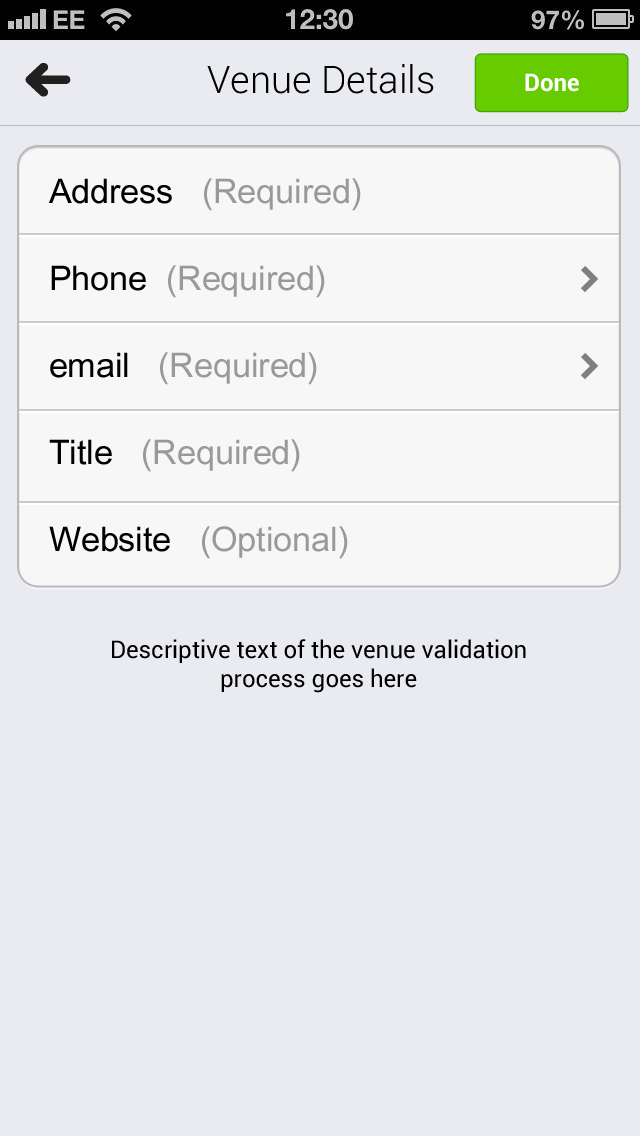
<style>
.page{position:relative;width:640px;height:1136px;background:#e9ebf0}
.page>*{position:absolute;margin:0}
.t1{font:38px "Roboto-Light";color:#000000}
.t2{font:24px "Roboto-Bold";color:#ffffff}
.t3{font:34px/87px "ArialUnicodeMS";color:#999999}
.t4{font:34px/87px "ArialUnicodeMS";color:#000000}
.t5{font:24px "Roboto-Regular";color:#000000}
</style>
<div class="page">
<p class="t1" style="left:207px;top:64px;width:227px;height:30px">Venue Details</p>
<p class="t2" style="left:525px;top:73px;width:54px;height:19px">Done</p>
<p class="t3" style="left:49px;top:178px;width:312px;height:381px"><span class="t4">Address   </span>(Required)<br><span class="t4">Phone </span> (Required)<br><span class="t4">email  </span> (Required)<br><span class="t4">Title  </span> (Required)<br><span class="t4">Website  </span> (Optional)</p>
<p class="t5" style="left:112px;top:639px;width:414px;height:54px;text-align:center">Descriptive text of the venue validation process goes here</p>
</div>
